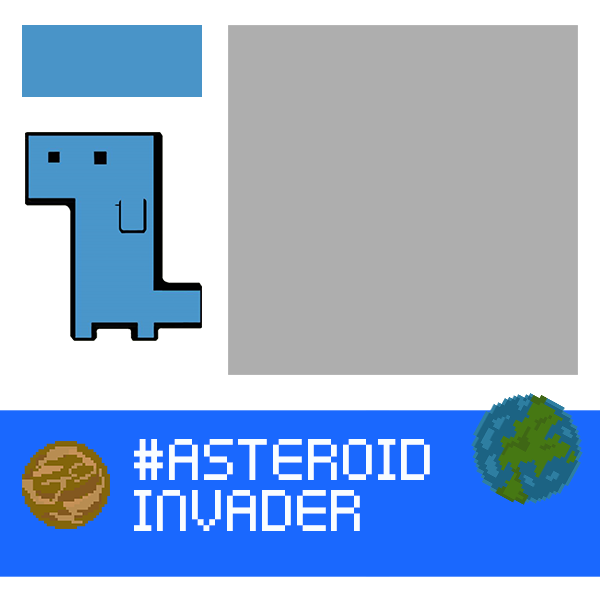
<style>
.page{position:relative;width:600px;height:600px;background:#aeaeae}
.page>*{position:absolute;margin:0}
.t1{font:47px "KenPixel";letter-spacing:0.005em;color:#f9fdff}
</style>
<div class="page">
<p class="t1" style="left:134px;top:439px;width:296px;height:92px">#ASTEROID<br>INVADER</p>
</div>
